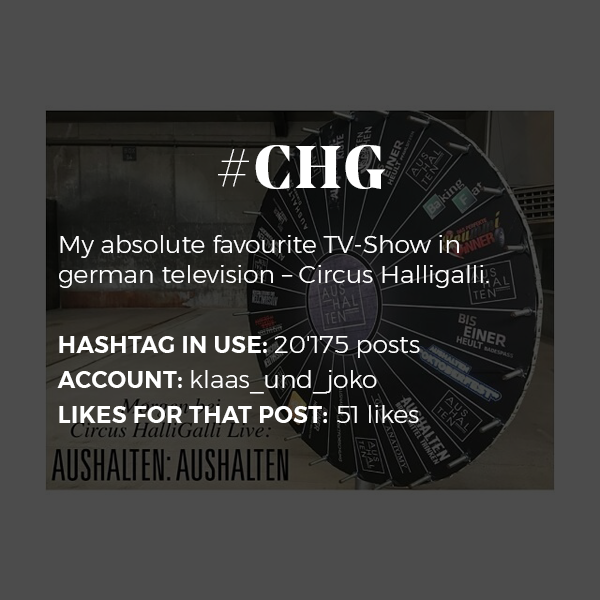
<style>
.page{position:relative;width:600px;height:600px;background:#4c4c4c}
.page>*{position:absolute;margin:0}
.t1{font:25px "Montserrat-Light";color:#ffffff}
.t2{font:60px/35px "NoeDisplay-Bold";letter-spacing:0.05em;color:#ffffff;text-transform:uppercase}
.t3{font:23px/35px "Montserrat-SemiBold";letter-spacing:0.02em;color:#ffffff;text-transform:uppercase}
.t4{font:25px/35px "Montserrat-Light";color:#ffffff}
</style>
<div class="page">
<p class="t1" style="left:57px;top:145px;width:432px;height:278px;text-align:center"><span class="t2">#CHG<br><br></span>My absolute favourite TV-Show in german television – Circus Halligalli. <br><br><span class="t3">Hashtag in use: </span><span class="t4">20'175 posts<br></span><span class="t3">Account: </span><span class="t4">klaas_und_joko<br></span><span class="t3">Likes for that post:</span><span class="t4"> 51 likes</span></p>
</div>
